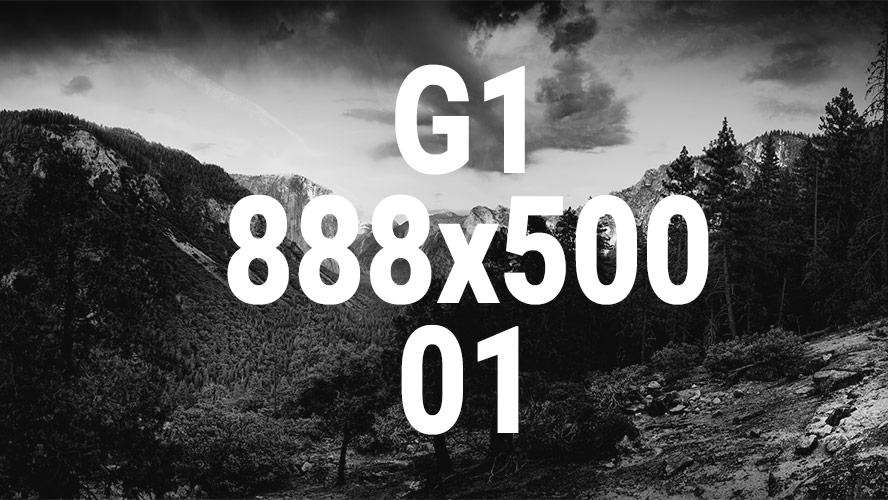
<style>
.page{position:relative;width:888px;height:500px}
.page>*{position:absolute;margin:0}
.t1{font:150px/130px "Roboto-Black";color:#ffffff;scale:0.82 1}
</style>
<div class="page">
<p class="t1" style="left:227px;top:64px;width:482px;height:371px;text-align:center">G1<br>888x500<br>01</p>
</div>
